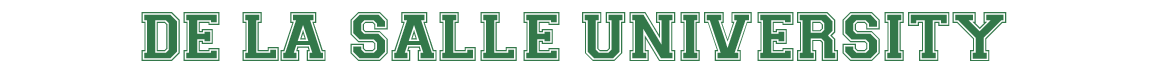
<style>
.page{position:relative;width:1150px;height:75px;background:#ffffff}
.page>*{position:absolute;margin:0}
.t1{font:70px "Varsity-Regular";color:#33784a}
</style>
<div class="page">
<p class="t1" style="left:141px;top:12px;width:866px;height:49px">DE LA SALLE UNIVERSITY</p>
</div>
